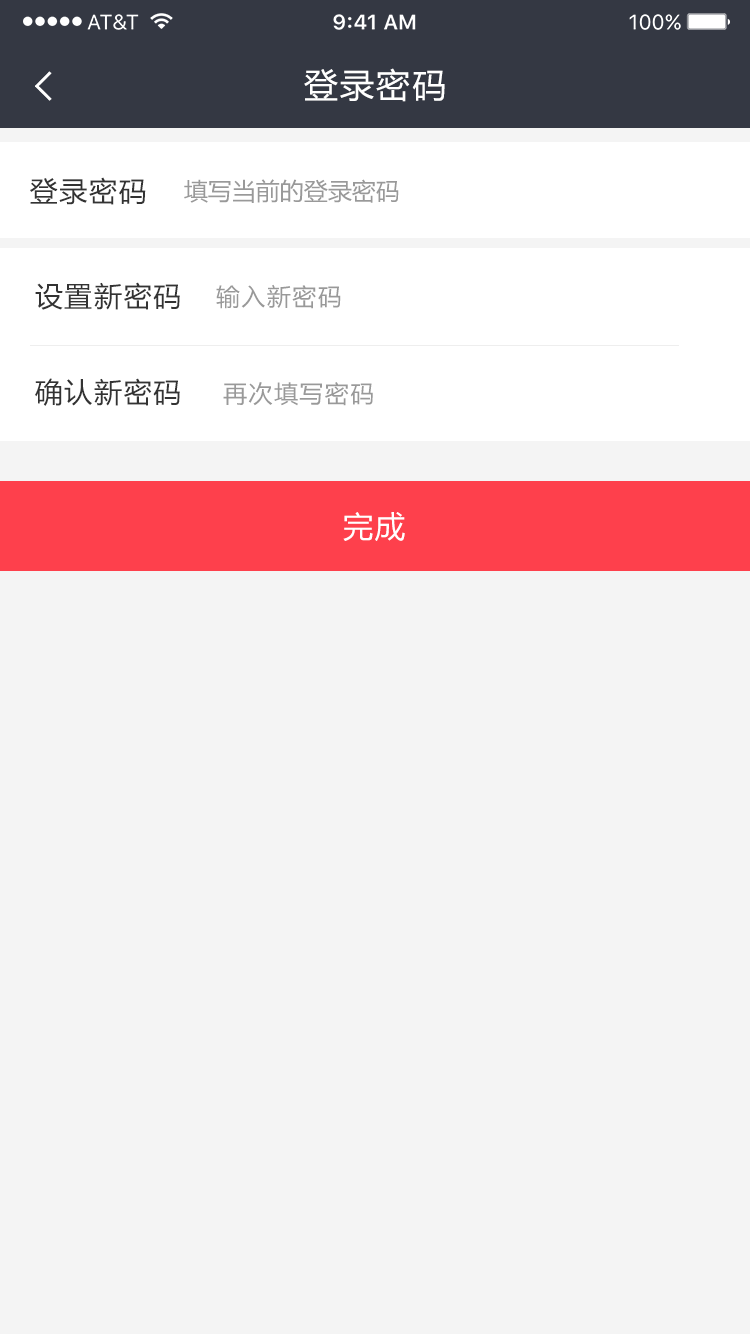
<style>
.page{position:relative;width:750px;height:1334px;background:#f4f4f4}
.page>*{position:absolute;margin:0}
.t1{font:34px "MicrosoftYaHei";letter-spacing:0.06em;color:#ffffff}
.t2{font:28px "MicrosoftYaHei";letter-spacing:0.06em;color:#333333}
.t3{font:24px "MicrosoftYaHei";color:#999999}
.t4{font:24px "MicrosoftYaHei";letter-spacing:0.06em;color:#999999}
.t5{font:30px "MicrosoftYaHei";letter-spacing:0.06em;color:#ffffff}
</style>
<div class="page">
<p class="t1" style="left:304px;top:68px;width:141px;height:34px">登录密码</p>
<p class="t2" style="left:30px;top:177px;width:116px;height:28px">登录密码</p>
<p class="t3" style="left:184px;top:179px;width:215px;height:24px">填写当前的登录密码</p>
<p class="t2" style="left:35px;top:282px;width:145px;height:28px">设置新密码</p>
<p class="t4" style="left:216px;top:284px;width:125px;height:25px">输入新密码</p>
<p class="t2" style="left:35px;top:378px;width:145px;height:28px">确认新密码</p>
<p class="t4" style="left:223px;top:382px;width:150px;height:24px">再次填写密码</p>
<p class="t5" style="left:343px;top:512px;width:62px;height:29px">完成</p>
</div>
